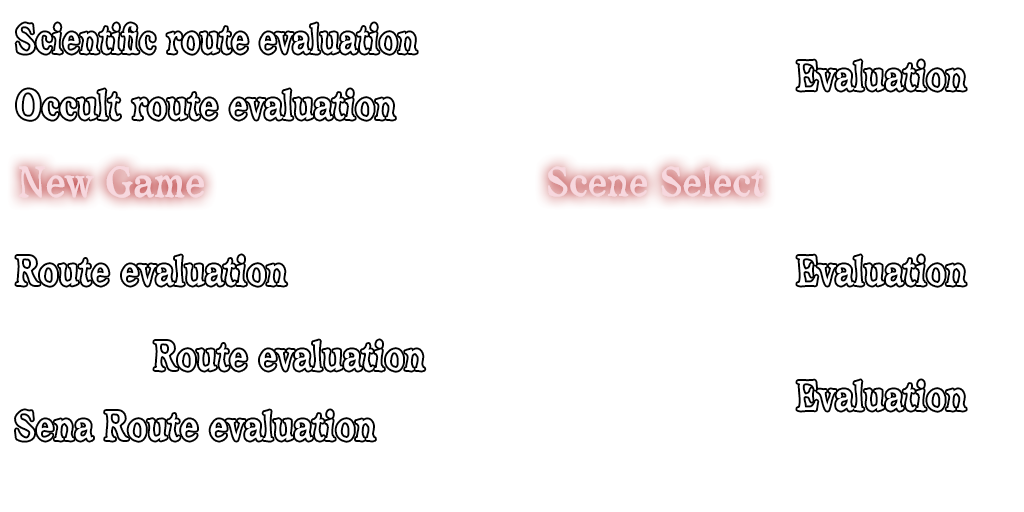
<style>
.page{position:relative;width:1024px;height:512px;background:#ffffff}
.page>*{position:absolute;margin:0}
.t1{font:40px "maidouComicMystery";color:#ffffff;scale:0.77 1}
.t2{font:40px "maidouComicMystery";color:#ffffff;scale:0.81 1}
.t3{font:42px "maidouComicMystery";color:#f7d7de;scale:0.86 1}
.t4{font:40px "maidouComicMystery";color:#f7d7de;scale:0.86 1}
</style>
<div class="page">
<p class="t1" style="left:16px;top:23px;width:401px;height:31px">Scientific route evaluation</p>
<p class="t2" style="left:797px;top:60px;width:169px;height:31px">Evaluation</p>
<p class="t2" style="left:17px;top:89px;width:378px;height:31px">Occult route evaluation</p>
<p class="t3" style="left:19px;top:166px;width:185px;height:32px">New Game</p>
<p class="t4" style="left:548px;top:166px;width:216px;height:31px">Scene Select</p>
<p class="t2" style="left:16px;top:255px;width:271px;height:31px">Route evaluation</p>
<p class="t2" style="left:797px;top:255px;width:169px;height:31px">Evaluation</p>
<p class="t2" style="left:154px;top:340px;width:271px;height:31px">Route evaluation</p>
<p class="t2" style="left:797px;top:380px;width:169px;height:31px">Evaluation</p>
<p class="t2" style="left:16px;top:410px;width:359px;height:31px">Sena Route evaluation</p>
</div>
